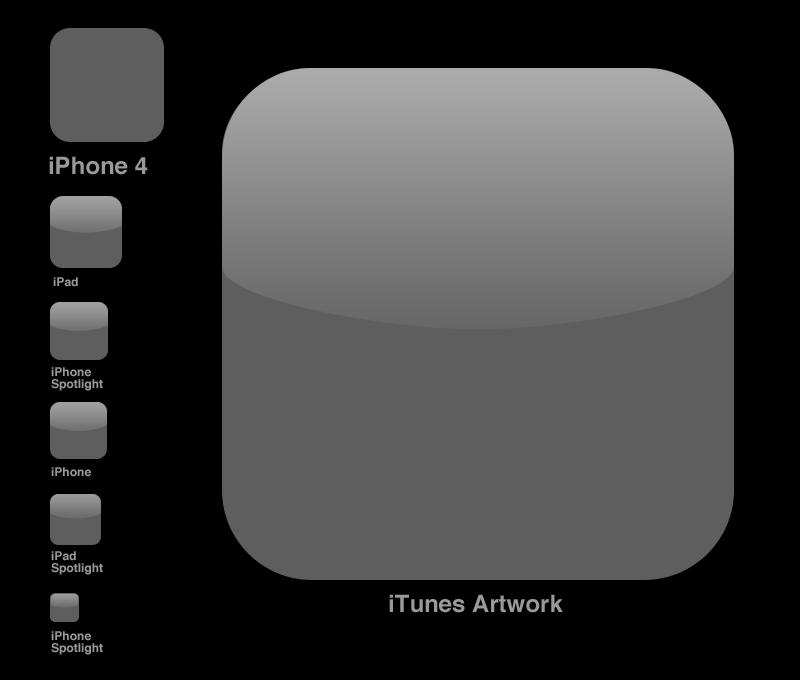
<style>
.page{position:relative;width:800px;height:680px;background:#000000}
.page>*{position:absolute;margin:0}
.t1{font:24px "Helvetica-Bold";color:#999999}
.t2{font:12px "Helvetica-Bold";color:#999999}
.t3{font:12px/12px "Helvetica-Bold";color:#999999}
</style>
<div class="page">
<p class="t1" style="left:49px;top:156px;width:99px;height:19px">iPhone 4</p>
<p class="t2" style="left:53px;top:277px;width:25px;height:10px">iPad</p>
<p class="t3" style="left:51px;top:367px;width:52px;height:24px"><span class="t2">iPhone<br></span>Spotlight</p>
<p class="t2" style="left:51px;top:467px;width:40px;height:10px">iPhone</p>
<p class="t3" style="left:51px;top:551px;width:52px;height:24px"><span class="t2">iPad<br></span>Spotlight</p>
<p class="t1" style="left:389px;top:594px;width:174px;height:19px">iTunes Artwork</p>
<p class="t3" style="left:51px;top:631px;width:52px;height:24px"><span class="t2">iPhone<br></span>Spotlight</p>
</div>
